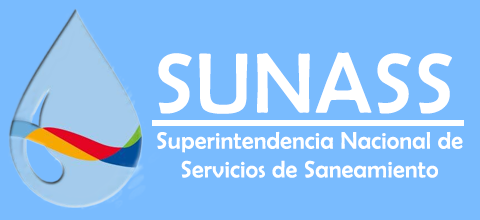
<style>
.page{position:relative;width:480px;height:220px;background:#79bbfe}
.page>*{position:absolute;margin:0}
.t1{font:86.1px "BerlinSansFB-Reg";letter-spacing:0.015em;color:#ffffff}
.t2{font:24px "BerlinSansFB-Reg";letter-spacing:0.015em;color:#ffffff}
</style>
<div class="page">
<p class="t1" style="left:158px;top:52px;width:294px;height:62px">SUNASS</p>
<p class="t2" style="left:157px;top:131px;width:306px;height:47px;text-align:center">Superintendencia Nacional de Servicios de Saneamiento</p>
</div>
